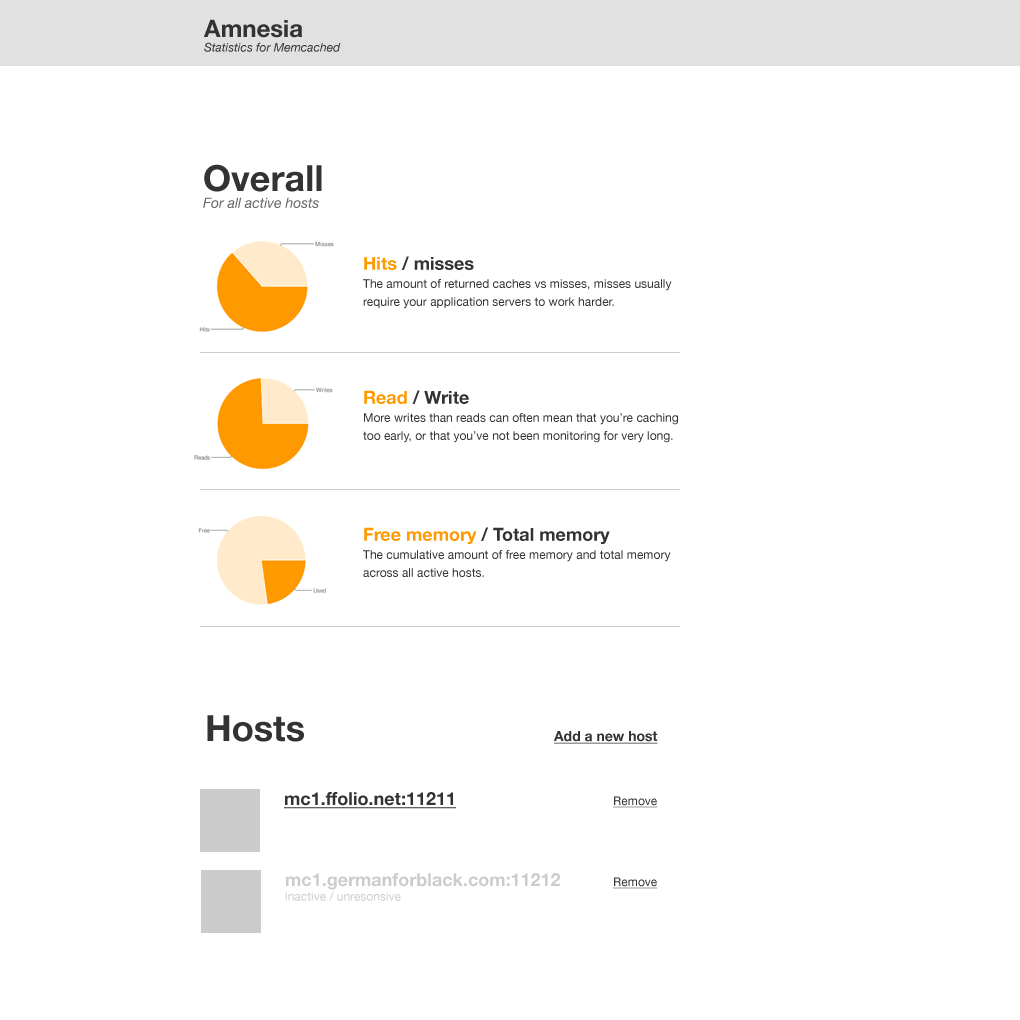
<style>
.page{position:relative;width:1020px;height:1020px;background:#ffffff}
.page>*{position:absolute;margin:0}
.t1{font:12px "HelveticaNeue-Italic";color:#333333}
.t2{font:24px "HelveticaNeue-Bold";color:#333333}
.t3{font:14px "HelveticaNeue-Italic";color:#666666}
.t4{font:36px "HelveticaNeue-Bold";color:#333333}
.t5{font:12px/18px "HelveticaNeue";color:#333333}
.t6{font:18px/18px "HelveticaNeue-Bold";color:#ff9900}
.t7{font:18px/18px "HelveticaNeue-Bold";color:#333333}
.t8{font:14px "HelveticaNeue-Bold";color:#333333;text-decoration:underline}
.t9{font:18px "HelveticaNeue-Bold";color:#333333;text-decoration:underline}
.t10{font:12px "HelveticaNeue";color:#333333;text-decoration:underline}
.t11{font:18px "HelveticaNeue-Bold";color:#cccccc}
.t12{font:12px "HelveticaNeue";color:#cccccc}
</style>
<div class="page">
<p class="t1" style="left:203px;top:19px;width:138px;height:33px"><span class="t2">Amnesia<br></span>Statistics for Memcached</p>
<p class="t3" style="left:203px;top:164px;width:119px;height:44px"><span class="t4">Overall<br></span>For all active hosts</p>
<p class="t5" style="left:363px;top:256px;width:309px;height:53px"><span class="t6">Hits</span><span class="t7"> / misses<br></span>The amount of returned caches vs misses, misses usually require your application servers to work harder.</p>
<p class="t5" style="left:363px;top:390px;width:315px;height:53px"><span class="t6">Read</span><span class="t7"> / Write<br></span>More writes than reads can often mean that you’re caching too early, or that you’ve not been monitoring for very long.</p>
<p class="t5" style="left:363px;top:527px;width:308px;height:50px"><span class="t6">Free memory</span><span class="t7"> / Total memory<br></span>The cumulative amount of free memory and total memory across all active hosts.</p>
<p class="t4" style="left:207px;top:715px;width:97px;height:27px">Hosts</p>
<p class="t8" style="left:554px;top:731px;width:104px;height:13px">Add a new host</p>
<p class="t9" style="left:284px;top:792px;width:172px;height:17px">mc1.ffolio.net:11211</p>
<p class="t10" style="left:613px;top:796px;width:45px;height:12px">Remove</p>
<p class="t11" style="left:285px;top:873px;width:275px;height:28px">mc1.germanforblack.com:11212<br><span class="t12">inactive / unresonsive</span></p>
<p class="t10" style="left:613px;top:877px;width:45px;height:12px">Remove</p>
</div>
